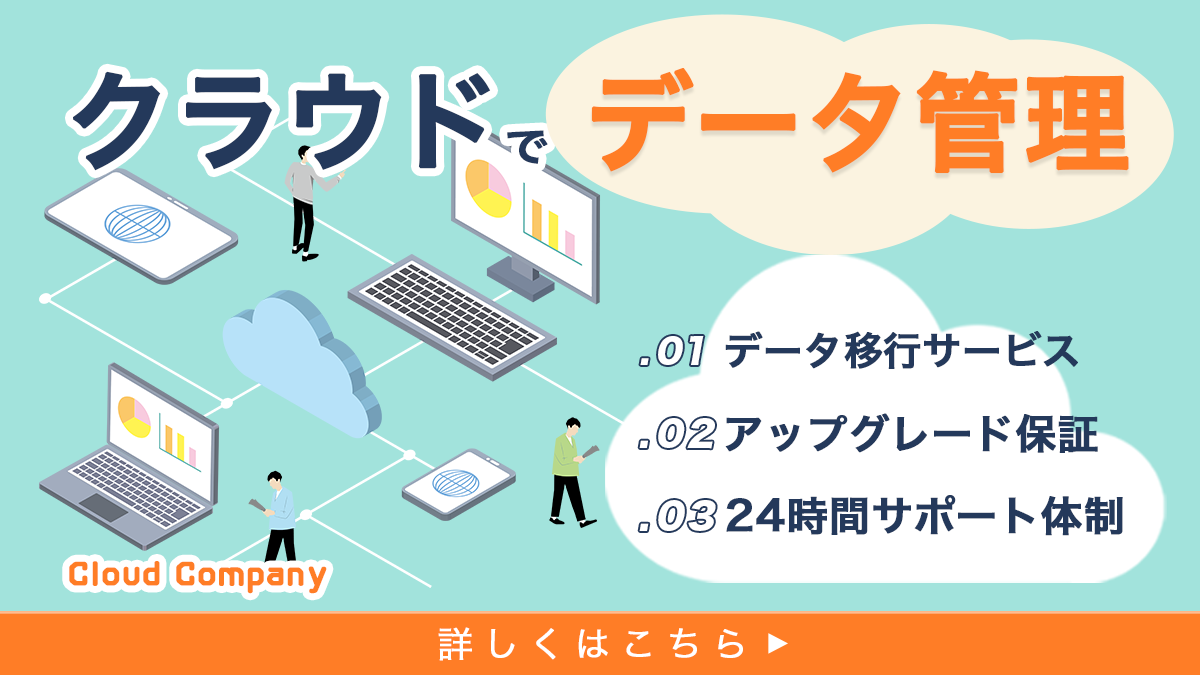
<style>
.page{position:relative;width:1200px;height:675px;background:#a2e3dc}
.page>*{position:absolute;margin:0}
.t1{font:106.7px "HiraKakuPro-W6";color:#24395b;font-weight:bold}
.t2{font:42.7px "HiraKakuPro-W6";color:#24395b;font-weight:bold}
.t3{font:106.7px "HiraKakuPro-W6";color:#ff7d26;font-weight:bold}
.t4{font:33.9px "HiraKakuStd-W8";color:#ffffff;font-style:italic}
.t5{font:38.7px "HiraKakuPro-W6";color:#24395b;font-weight:bold}
.t6{font:40.7px "HiraKakuPro-W6";color:#24395b;font-weight:bold}
.t7{font:35.6px "HiraKakuStd-W8";color:#ffffff;font-style:italic}
.t8{font:41.4px "HiraKakuPro-W6";color:#24395b;font-weight:bold}
.t9{font:36.2px "HiraKakuStd-W8";color:#ffffff;font-style:italic}
.t10{font:32px "AB-kokoro_no3";letter-spacing:-0.1em;color:#ff7d26;font-weight:bold}
.t11{font:35.6px "HiraKakuPro-W3";letter-spacing:0.26em;color:#ffffff;font-weight:bold}
</style>
<div class="page">
<p class="t1" style="left:73px;top:71px;width:475px;height:100px">クラウド<span class="t2">で</span></p>
<p class="t3" style="left:591px;top:68px;width:538px;height:106px">データ管理</p>
<p class="t4" style="left:640px;top:336px;width:64px;height:29px">.01</p>
<p class="t5" style="left:725px;top:331px;width:353px;height:38px">データ移行サービス</p>
<p class="t6" style="left:725px;top:413px;width:373px;height:40px">アップグレード保証</p>
<p class="t7" style="left:639px;top:418px;width:76px;height:31px">.02</p>
<p class="t8" style="left:726px;top:495px;width:397px;height:41px">24時間サポート体制</p>
<p class="t9" style="left:639px;top:500px;width:77px;height:31px">.03</p>
<p class="t10" style="left:69px;top:561px;width:258px;height:33px">Cloud Company</p>
<p class="t11" style="left:438px;top:627px;width:305px;height:34px">詳しくはこちら</p>
</div>
